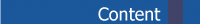
<style>
.page{position:relative;width:200px;height:24px;background:#1b589b}
.page>*{position:absolute;margin:0}
.t1{font:18px "Tahoma";color:#ffffff}
</style>
<div class="page">
<p class="t1" style="left:98px;top:7px;width:63px;height:14px">Content</p>
</div>
